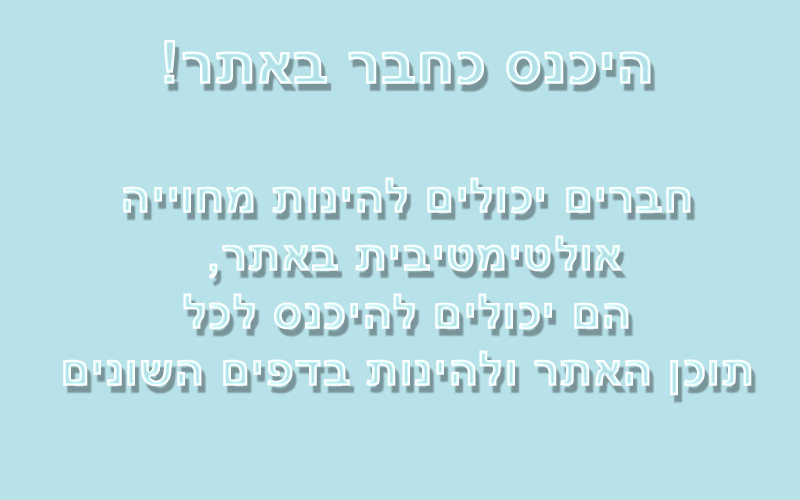
<style>
.page{position:relative;width:800px;height:500px;background:#b8e2ea}
.page>*{position:absolute;margin:0}
.t1{font:48px "Arial-BoldMT";font-weight:bold}
.t2{font:60px "Arial-BoldMT";font-weight:bold}
</style>
<div class="page">
<p class="t1" style="left:63px;top:40px;width:689px;height:356px;text-align:center"><span class="t2">!רתאב רבחכ סנכיה<br><br></span>הייוחמ תוניהל םילוכי םירבח<br> ,רתאב תיביטמיטלוא<br>לכל סנכיהל םילוכי םה<br>םינושה םיפדב תוניהלו רתאה ןכות</p>
</div>
